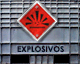
<style>
.page{position:relative;width:80px;height:64px}
.page>*{position:absolute;margin:0}
.t1{font:8px "CenturyGothic-Bold";color:#0a091c}
</style>
<div class="page">
<p class="t1" style="left:17px;top:46px;width:47px;height:7px">EXPLOSIVOS</p>
</div>
